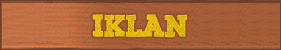
<style>
.page{position:relative;width:281px;height:50px}
.page>*{position:absolute;margin:0}
.t1{font:30px "ScribbleBoxDEMO";color:#f0c907}
</style>
<div class="page">
<p class="t1" style="left:92px;top:14px;width:96px;height:24px">Iklan</p>
</div>
